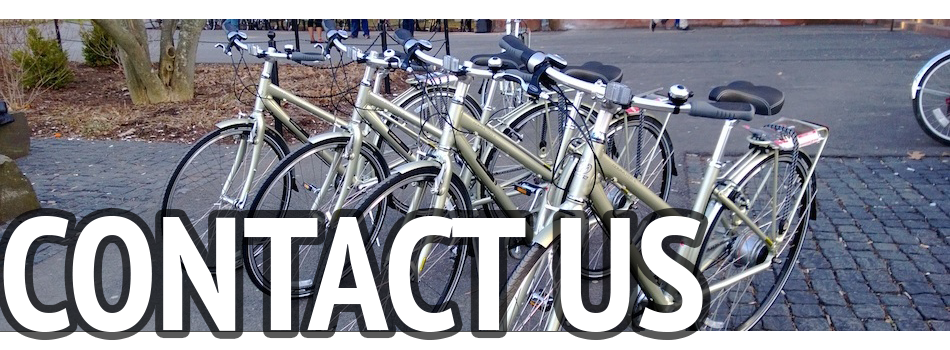
<style>
.page{position:relative;width:950px;height:350px}
.page>*{position:absolute;margin:0}
.t1{font:160px "PTSans-NarrowBold";color:#ffffff}
</style>
<div class="page">
<p class="t1" style="left:3px;top:216px;width:700px;height:116px">CONTACT US</p>
</div>
